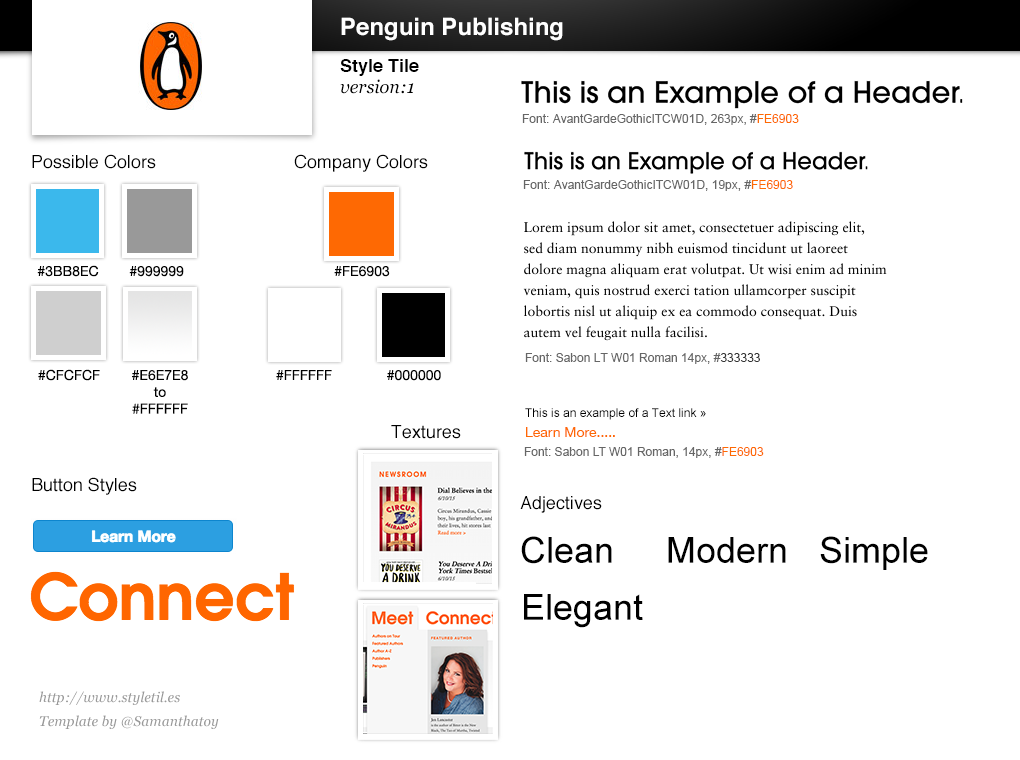
<style>
.page{position:relative;width:1020px;height:760px;background:#ffffff}
.page>*{position:absolute;margin:0}
.t1{font:24px "Helvetica-Bold";color:#ffffff}
.t2{font:18px "Helvetica-Bold";color:#000000}
.t3{font:18px "Georgia-Italic";color:#000000}
.t4{font:12px "ArialMT";color:#666666}
.t5{font:12px "ArialMT";color:#fe6903}
.t6{font:18px "Helvetica";color:#000000}
.t7{font:14px "HelveticaNeue";color:#000000}
.t8{font:12px "ArialMT";color:#333333}
.t9{font:12px "ArialMT";color:#000000}
.t10{font:14px "HelveticaNeue";color:#fe6903}
.t11{font:36px "ArialMT";color:#000000}
.t12{font:14px/24px "Georgia-Italic";color:#999999}
</style>
<div class="page">
<p class="t1" style="left:341px;top:17px;width:222px;height:24px">Penguin Publishing</p>
<p class="t2" style="left:340px;top:59px;width:79px;height:17px">Style Tile</p>
<p class="t3" style="left:340px;top:79px;width:74px;height:15px">version:1</p>
<p class="t4" style="left:522px;top:114px;width:277px;height:11px">Font: AvantGardeGothicITCW01D, 263px, #<span class="t5">FE6903</span></p>
<p class="t6" style="left:32px;top:154px;width:124px;height:15px">Possible Colors</p>
<p class="t6" style="left:294px;top:154px;width:134px;height:18px">Company Colors</p>
<p class="t4" style="left:523px;top:180px;width:270px;height:11px">Font: AvantGardeGothicITCW01D, 19px, #<span class="t5">FE6903</span></p>
<p class="t7" style="left:37px;top:265px;width:62px;height:12px">#3BB8EC</p>
<p class="t7" style="left:129px;top:266px;width:55px;height:11px">#999999</p>
<p class="t7" style="left:334px;top:266px;width:56px;height:11px">#FE6903</p>
<p class="t4" style="left:525px;top:353px;width:235px;height:11px">Font: Sabon LT W01 Roman 14px, #<span class="t8">333333</span></p>
<p class="t7" style="left:38px;top:369px;width:62px;height:12px">#CFCFCF</p>
<p class="t7" style="left:132px;top:370px;width:56px;height:44px;text-align:center">#E6E7E8<br>to<br>#FFFFFF</p>
<p class="t7" style="left:276px;top:370px;width:56px;height:10px">#FFFFFF</p>
<p class="t7" style="left:387px;top:370px;width:54px;height:11px">#000000</p>
<p class="t9" style="left:525px;top:408px;width:181px;height:12px">This is an example of a Text link »</p>
<p class="t6" style="left:391px;top:425px;width:70px;height:14px">Textures</p>
<p class="t10" style="left:526px;top:427px;width:89px;height:10px">Learn More.....</p>
<p class="t4" style="left:524px;top:447px;width:240px;height:11px">Font: Sabon LT W01 Roman, 14px, #<span class="t5">FE6903</span></p>
<p class="t6" style="left:32px;top:477px;width:105px;height:18px">Button Styles</p>
<p class="t6" style="left:520px;top:496px;width:82px;height:17px">Adjectives</p>
<p class="t11" style="left:521px;top:536px;width:91px;height:28px">Clean</p>
<p class="t11" style="left:668px;top:537px;width:118px;height:26px">Modern</p>
<p class="t11" style="left:820px;top:536px;width:108px;height:34px">Simple</p>
<p class="t11" style="left:524px;top:594px;width:119px;height:34px">Elegant</p>
<p class="t12" style="left:39px;top:691px;width:180px;height:38px">http://www.styletil.es<br>Template by @Samanthatoy</p>
</div>
